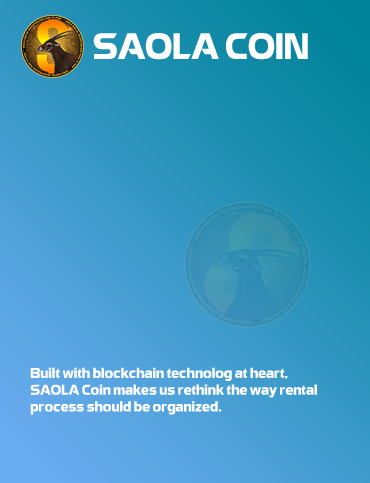
<style>
.page{position:relative;width:370px;height:483px}
.page>*{position:absolute;margin:0}
.t1{font:36px "UTM-Eremitage";color:#ffffff}
.t2{font:14px "UTM-Eremitage";color:#ffffff}
</style>
<div class="page">
<p class="t1" style="left:93px;top:33px;width:215px;height:27px">SAOLA COIN</p>
<p class="t2" style="left:30px;top:367px;width:287px;height:48px">Built with blockchain technolog at heart, <br>SAOLA Coin makes us rethink the way rental <br>process should be organized.</p>
</div>
